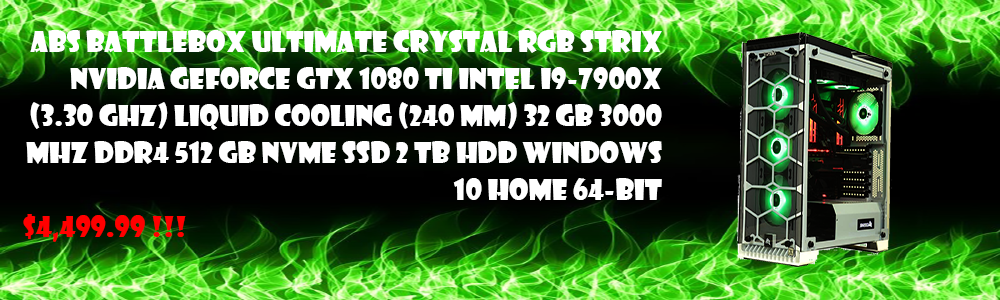
<style>
.page{position:relative;width:1000px;height:300px}
.page>*{position:absolute;margin:0}
.t1{font:28px/37px "ShowcardGothic-Reg";color:#ffffff}
.t2{font:28px/37px "ShowcardGothic-Reg";color:#ff0000}
</style>
<div class="page">
<p class="t1" style="left:23px;top:30px;width:639px;height:212px;text-align:right">ABS Battlebox Ultimate Crystal RGB STRIX NVIDIA GeForce GTX 1080 Ti Intel i9-7900X (3.30 GHz) Liquid Cooling (240 mm) 32 GB 3000 MHz DDR4 512 GB NVMe SSD 2 TB HDD Windows <br>10 Home 64-Bit<br><span class="t2">$4,499.99 !!!</span></p>
</div>
